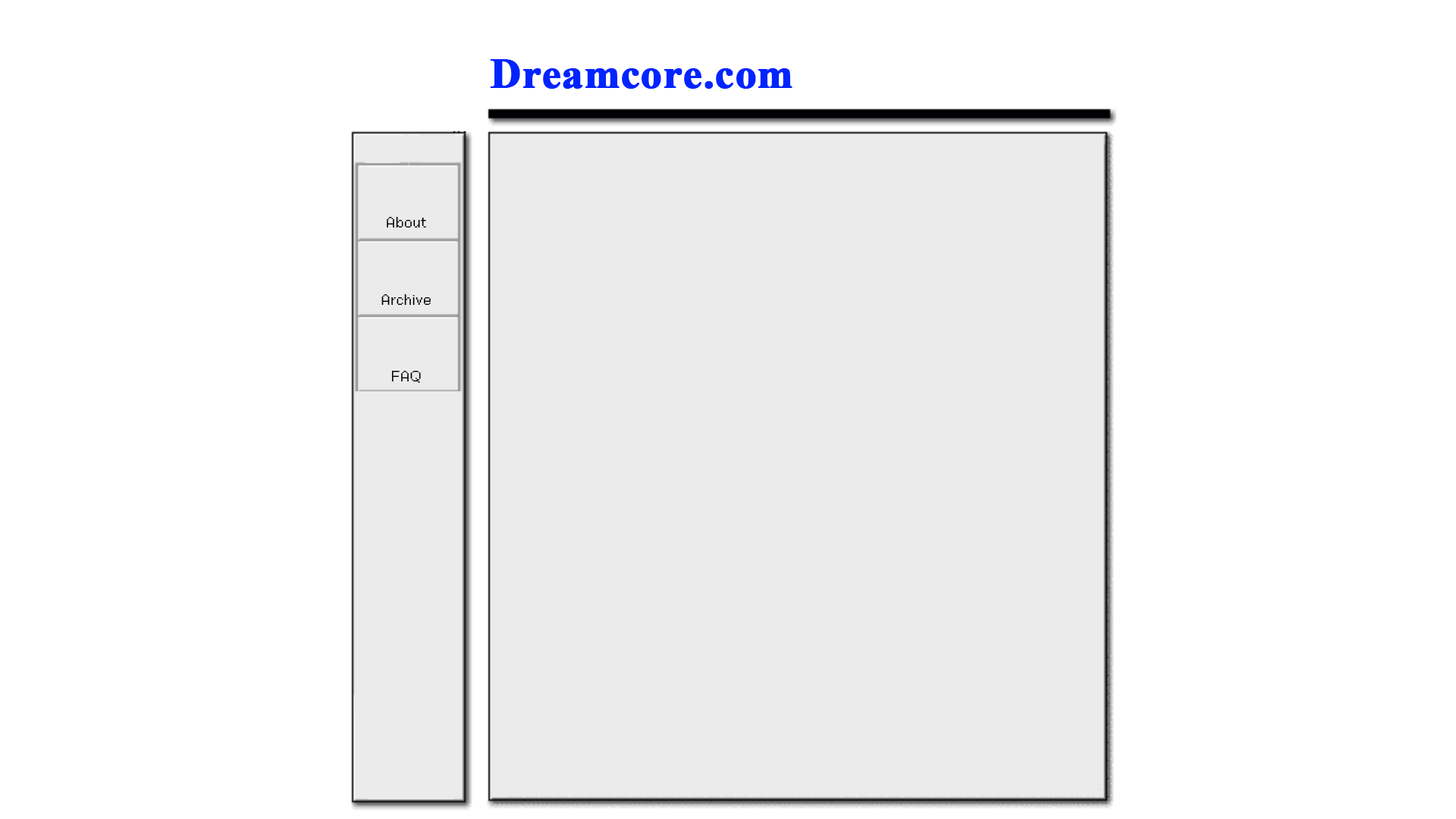
<style>
.page{position:relative;width:1456px;height:819px;background:#ffffff}
.page>*{position:absolute;margin:0}
.t1{font:42.5px "TimesNewRomanPS-BoldMT";color:#0024ff;font-weight:bold}
.t2{font:15.2px "CoFoSansPixel-Regular";color:#000000}
</style>
<div class="page">
<p class="t1" style="left:490px;top:59px;width:302px;height:30px">Dreamcore.com</p>
<p class="t2" style="left:387px;top:217px;width:39px;height:10px">About</p>
<p class="t2" style="left:381px;top:294px;width:50px;height:11px">Archive</p>
<p class="t2" style="left:391px;top:371px;width:30px;height:12px">FAQ</p>
</div>
